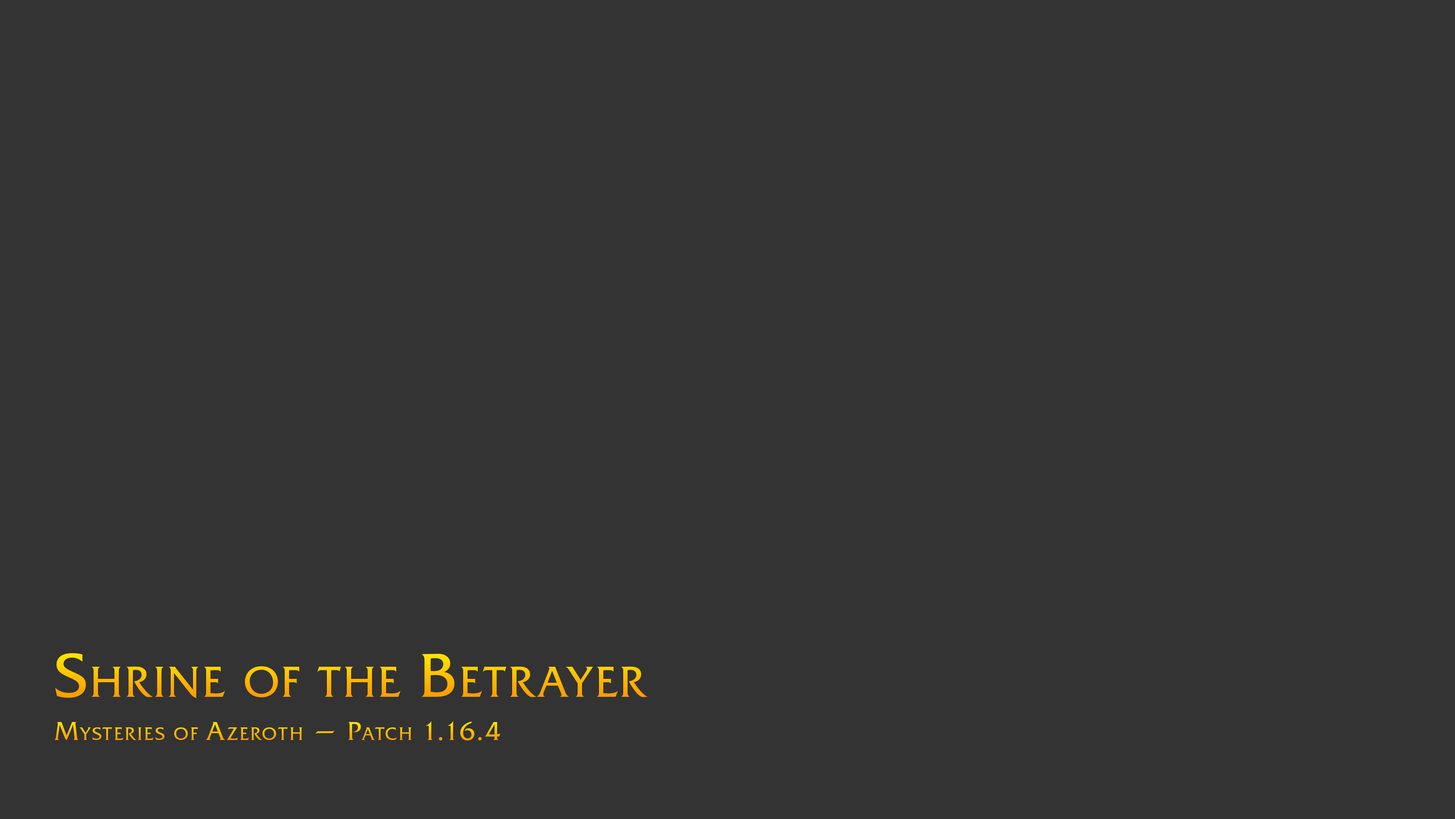
<style>
.page{position:relative;width:1455px;height:819px;background:#333333}
.page>*{position:absolute;margin:0}
.t1{font:61px "FrizQuadrataC";letter-spacing:0.05em;font-variant:small-caps}
.t2{font:25.4px "FrizQuadrataC";letter-spacing:0.075em;font-variant:small-caps}
</style>
<div class="page">
<p class="t1" style="left:55px;top:653px;width:593px;height:46px">Shrine of the Betrayer</p>
<p class="t2" style="left:54px;top:721px;width:447px;height:20px">Mysteries of Azeroth — Patch 1.16.4</p>
</div>
